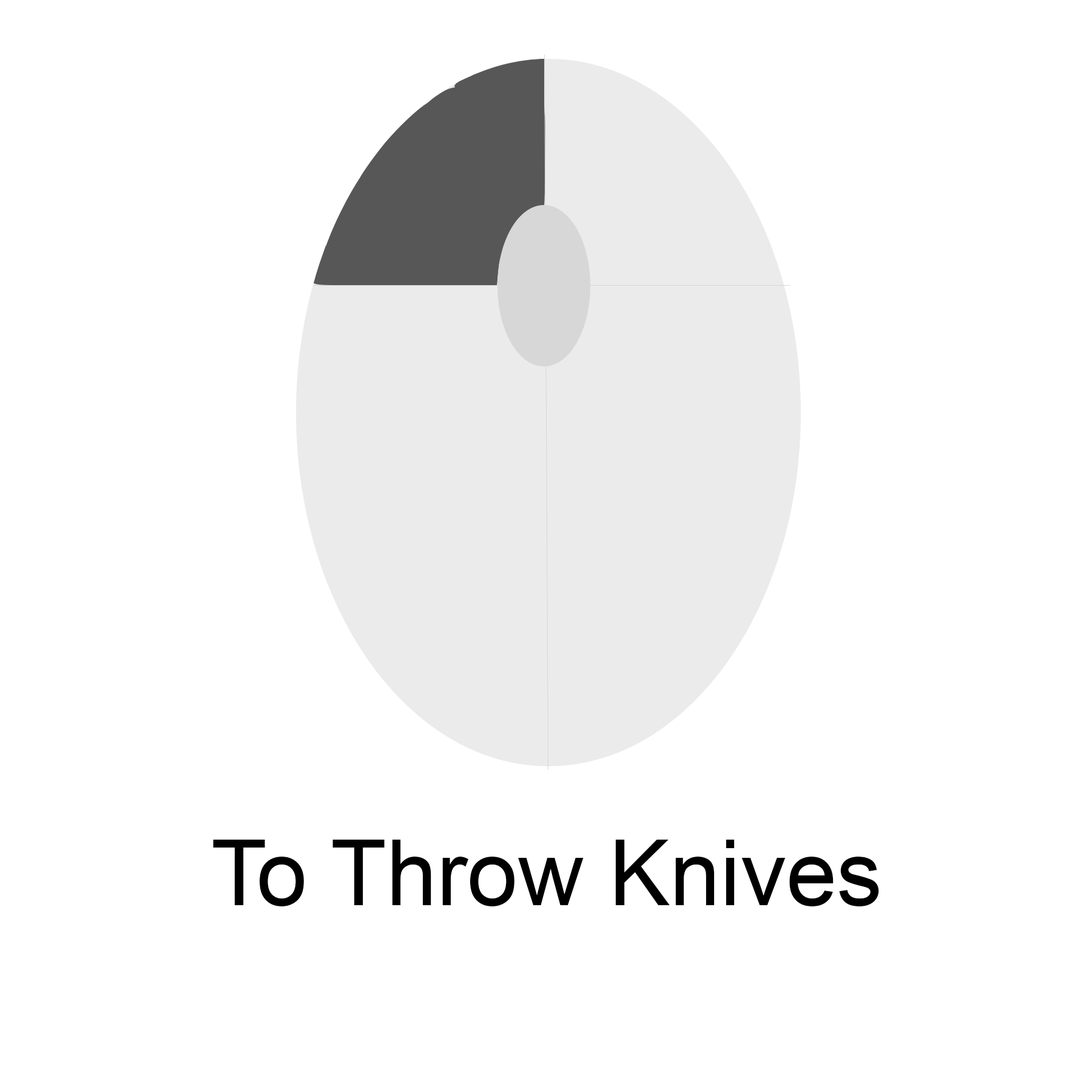
<style>
.page{position:relative;width:1092px;height:1092px;background:#ffffff}
.page>*{position:absolute;margin:0}
.t1{font:91px "ArialMT";color:#000000}
</style>
<div class="page">
<p class="t1" style="left:213px;top:840px;width:666px;height:66px">To Throw Knives</p>
</div>
